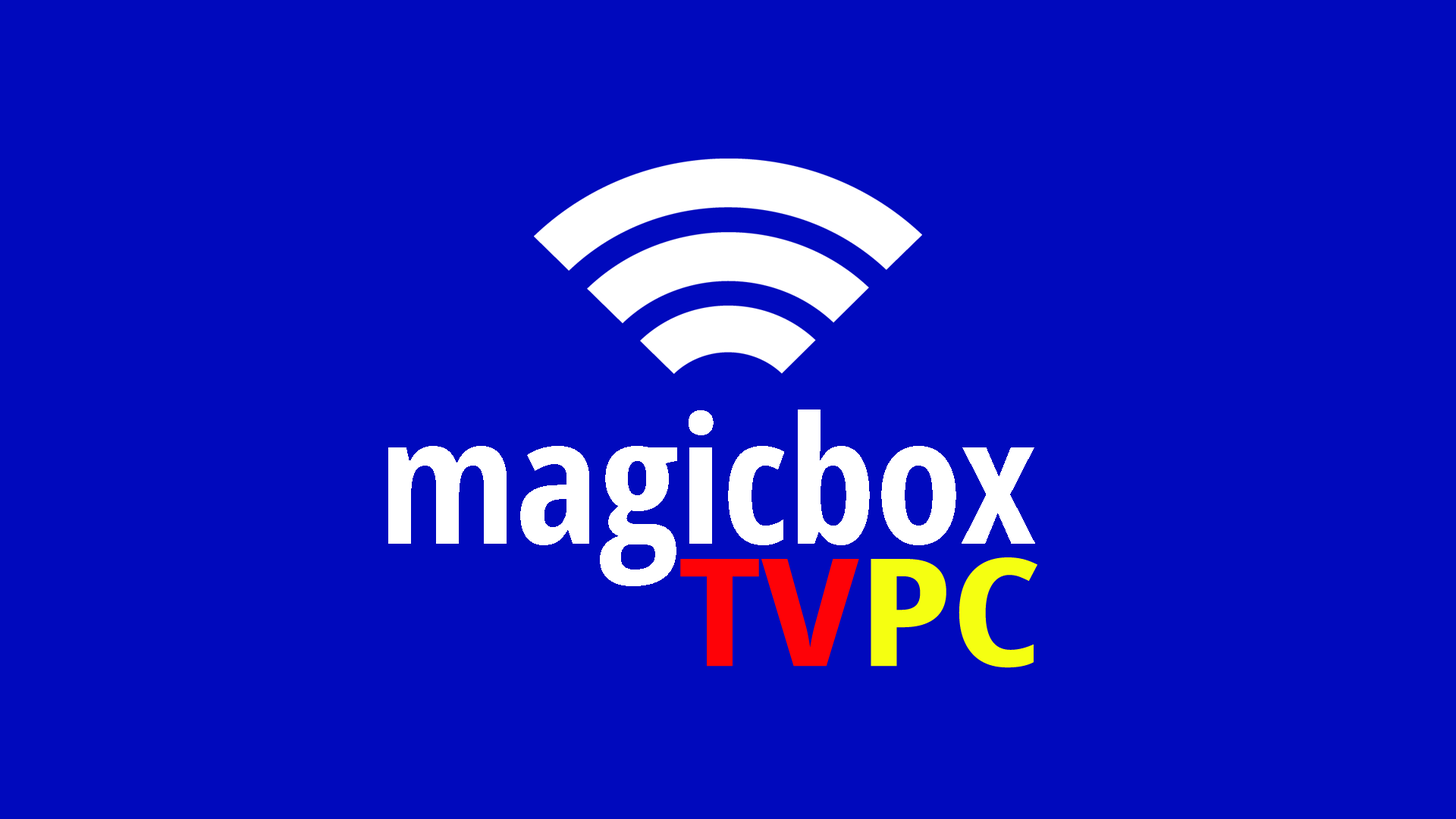
<style>
.page{position:relative;width:1456px;height:819px;background:#0009bd}
.page>*{position:absolute;margin:0}
.t1{font:176.9px "OpenSans-CondensedBold";color:#ffffff}
.t2{font:149.9px "OpenSans-CondensedBold";color:#fe0207;scale:1.29 1}
.t3{font:149.9px "OpenSans-CondensedBold";color:#f5ff11;scale:1.29 1}
</style>
<div class="page">
<p class="t1" style="left:388px;top:409px;width:647px;height:177px">magicbox</p>
<p class="t2" style="left:680px;top:557px;width:357px;height:111px">TV<span class="t3">PC</span></p>
</div>
